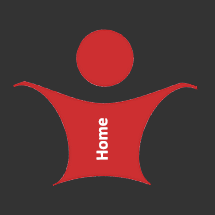
<style>
.page{position:relative;width:215px;height:215px;background:#333333}
.page>*{position:absolute;margin:0}
.t1{font:17.3px "Calibri-Bold";color:#ffffff}
</style>
<div class="page">
<p class="t1" style="left:96px;top:118px;width:12px;height:42px;rotate:-91deg">Home</p>
</div>
